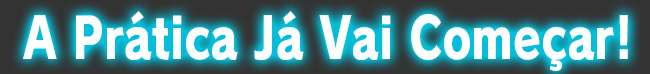
<style>
.page{position:relative;width:650px;height:74px;background:#fdffff}
.page>*{position:absolute;margin:0}
.t1{font:56px "RodinPro-EB";color:#fdffff;scale:0.8 1}
</style>
<div class="page">
<p class="t1" style="left:23px;top:11px;width:605px;height:60px">A Prática Já Vai Começar!</p>
</div>
